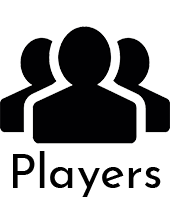
<style>
.page{position:relative;width:170px;height:198px;background:#ffffff}
.page>*{position:absolute;margin:0}
.t1{font:48px "JosefinSans-Regular";color:#000000}
</style>
<div class="page">
<p class="t1" style="left:13px;top:151px;width:148px;height:46px">Players</p>
</div>
